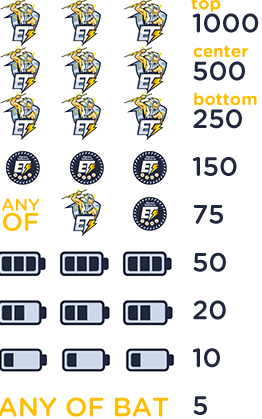
<style>
.page{position:relative;width:262px;height:419px;background:#ffffff}
.page>*{position:absolute;margin:0}
.t1{font:26.4px "GothamRounded-Medium";color:#21273d}
.t2{font:17px "GothamRounded-Bold";color:#ffbd00}
.t3{font:17px/20px "GothamRounded-Medium";color:#ffbd00}
.t4{font:25.2px/20px "GothamRounded-Medium";color:#ffbd00}
.t5{font:26.4px "GothamRounded-Medium";color:#ffbd00}
</style>
<div class="page">
<p class="t1" style="left:192px;top:13px;width:67px;height:20px">1000</p>
<p class="t2" style="left:193px;top:45px;width:55px;height:13px">center</p>
<p class="t1" style="left:193px;top:61px;width:52px;height:20px">500</p>
<p class="t2" style="left:194px;top:92px;width:63px;height:14px">bottom</p>
<p class="t1" style="left:193px;top:109px;width:49px;height:20px">250</p>
<p class="t1" style="left:192px;top:157px;width:45px;height:19px">150</p>
<p class="t3" style="left:2px;top:198px;width:38px;height:33px;text-align:center">ANY<br><span class="t4">OF</span></p>
<p class="t1" style="left:193px;top:205px;width:30px;height:19px">75</p>
<p class="t1" style="left:193px;top:252px;width:33px;height:20px">50</p>
<p class="t1" style="left:193px;top:300px;width:33px;height:20px">20</p>
<p class="t1" style="left:192px;top:348px;width:28px;height:20px">10</p>
<p class="t5" style="left:0px;top:397px;width:169px;height:20px">ANY OF BAT</p>
<p class="t1" style="left:193px;top:396px;width:14px;height:19px">5</p>
</div>
